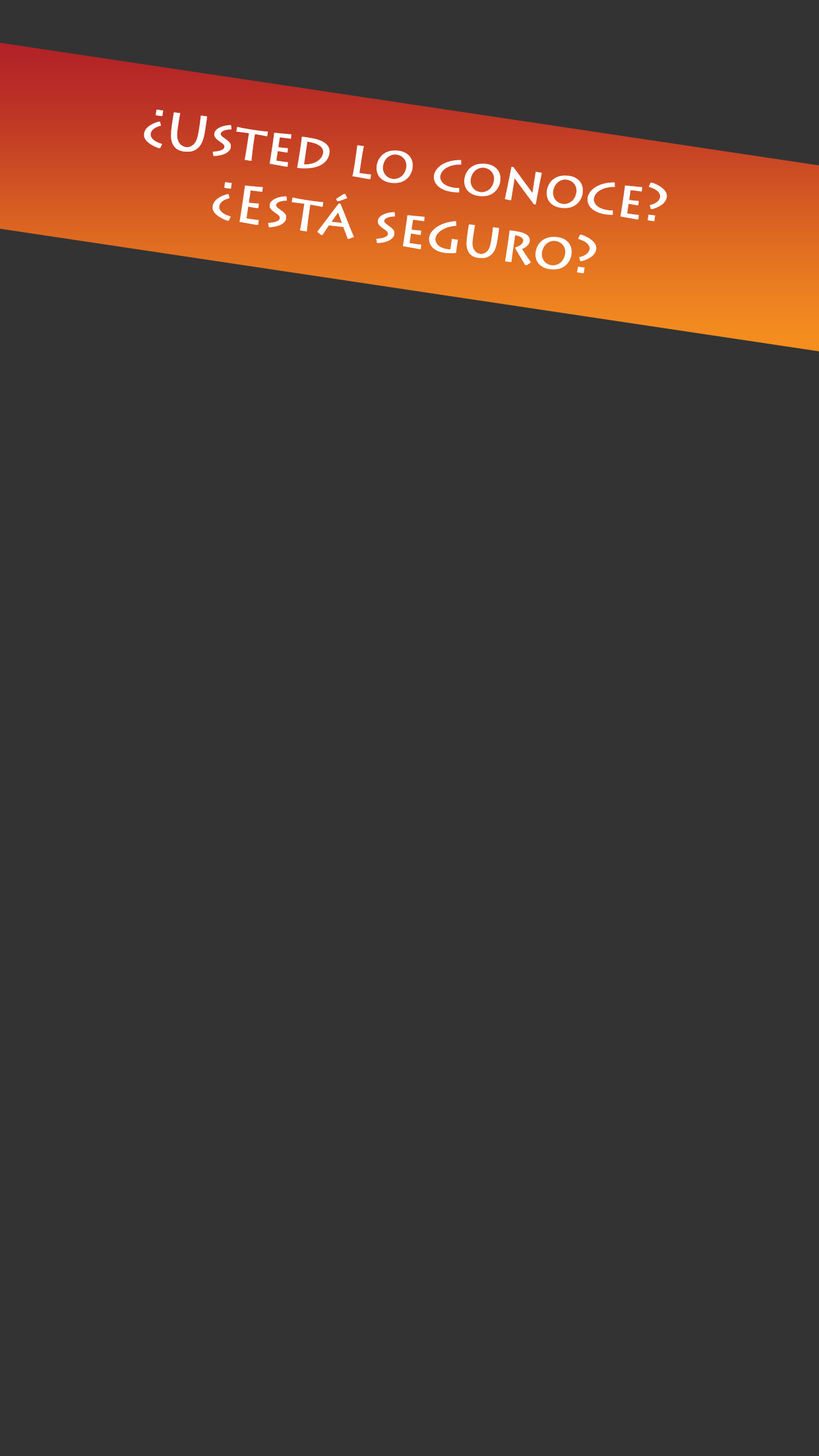
<style>
.page{position:relative;width:819px;height:1456px;background:#333333}
.page>*{position:absolute;margin:0}
.t1{font:51.5px "LithosPro-Regular";color:#ffffff;font-weight:bold}
</style>
<div class="page">
<p class="t1" style="left:144px;top:109px;width:523px;height:165px;text-align:center;rotate:9deg">¿Usted lo conoce? <br>¿Está seguro?</p>
</div>
